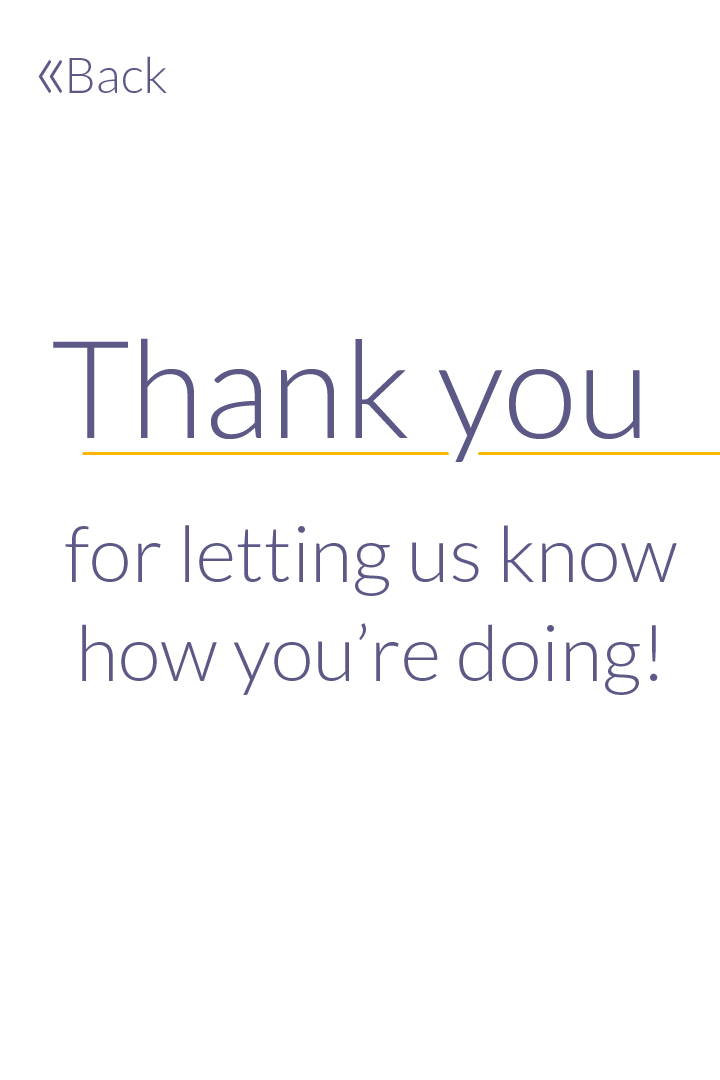
<style>
.page{position:relative;width:720px;height:1080px;background:#ffffff}
.page>*{position:absolute;margin:0}
.t1{font:86px "Lato-Light";color:#5c5987}
.t2{font:50px "Lato-Light";color:#5c5987}
.t3{font:136px "Lato-Light";color:#5c5987}
.t4{font:78px/99px "Lato-Light";color:#5c5987}
</style>
<div class="page">
<p class="t1" style="left:38px;top:60px;width:24px;height:33px">«</p>
<p class="t2" style="left:69px;top:56px;width:98px;height:37px">Back</p>
<p class="t3" style="left:53px;top:338px;width:587px;height:124px">Thank you</p>
<p class="t4" style="left:65px;top:525px;width:612px;height:170px;text-align:center">for letting us know<br>how you’re doing!</p>
</div>
